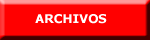
<style>
.page{position:relative;width:150px;height:40px;background:#ff0000}
.page>*{position:absolute;margin:0}
.t1{font:12px "Verdana-Bold";color:#ffffff}
</style>
<div class="page">
<p class="t1" style="left:35px;top:14px;width:72px;height:10px">ARCHIVOS</p>
</div>
